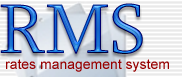
<style>
.page{position:relative;width:182px;height:77px}
.page>*{position:absolute;margin:0}
.t1{font:72px "Sylfaen"}
.t2{font:14px "ArialMT";color:#970000}
</style>
<div class="page">
<p class="t1" style="left:0px;top:3px;width:143px;height:51px">RMS</p>
<p class="t2" style="left:6px;top:59px;width:163px;height:13px">rates management system</p>
</div>
